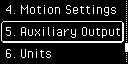
<style>
.page{position:relative;width:128px;height:64px;background:#000000}
.page>*{position:absolute;margin:0}
.t1{font:16px "PixelOperator";color:#ffffff}
</style>
<div class="page">
<p class="t1" style="left:6px;top:5px;width:10px;height:9px">4.</p>
<p class="t1" style="left:20px;top:5px;width:96px;height:11px">Motion Settings</p>
<p class="t1" style="left:6px;top:27px;width:10px;height:9px">5.</p>
<p class="t1" style="left:20px;top:27px;width:100px;height:11px">Auxiliary Output</p>
<p class="t1" style="left:6px;top:49px;width:10px;height:9px">6.</p>
<p class="t1" style="left:20px;top:49px;width:31px;height:9px">Units</p>
</div>
